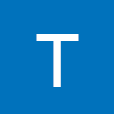
<style>
.page{position:relative;width:114px;height:114px;background:#0072bc}
.page>*{position:absolute;margin:0}
.t1{font:74px "TrebuchetMS";color:#ffffff}
</style>
<div class="page">
<p class="t1" style="left:36px;top:34px;width:43px;height:53px">T</p>
</div>
